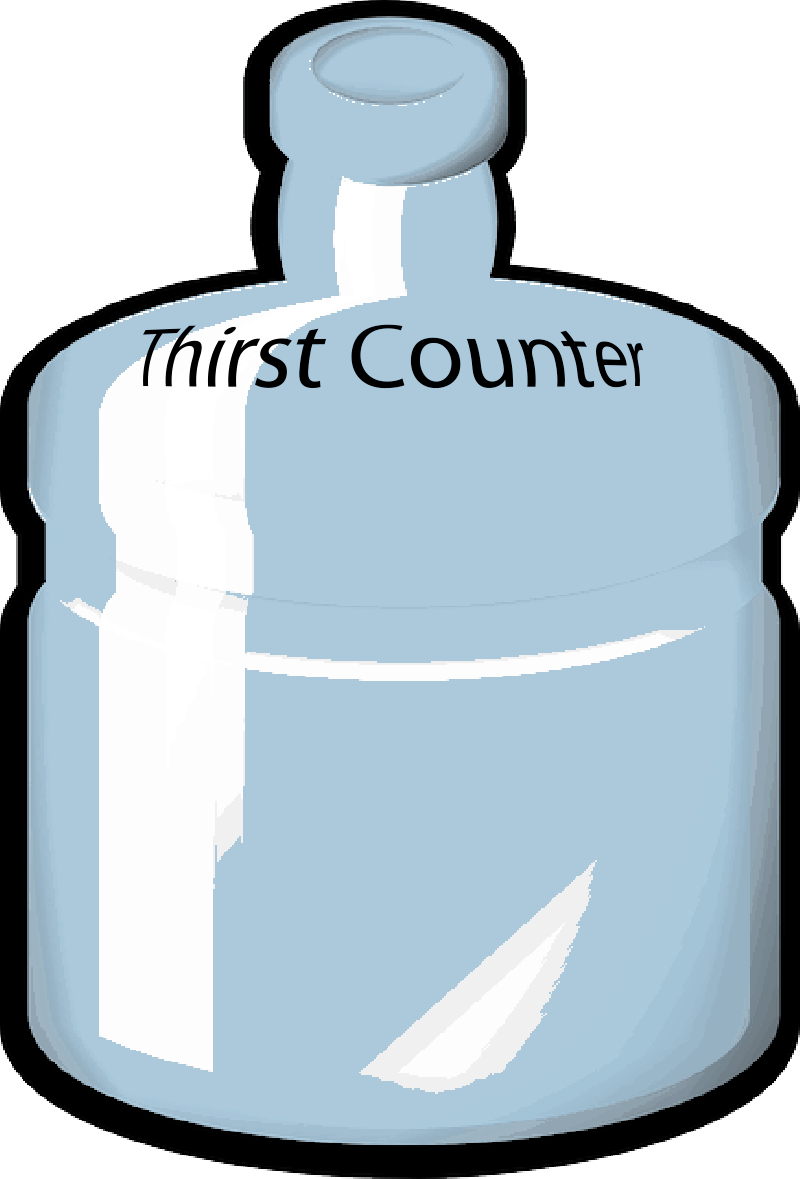
<style>
.page{position:relative;width:800px;height:1179px;background:#acc9dc}
.page>*{position:absolute;margin:0}
.t1{font:80px "MyriadPro-Regular";color:#000000}
</style>
<div class="page">
<p class="t1" style="left:143px;top:324px;width:501px;height:65px">Thirst Counter</p>
</div>
